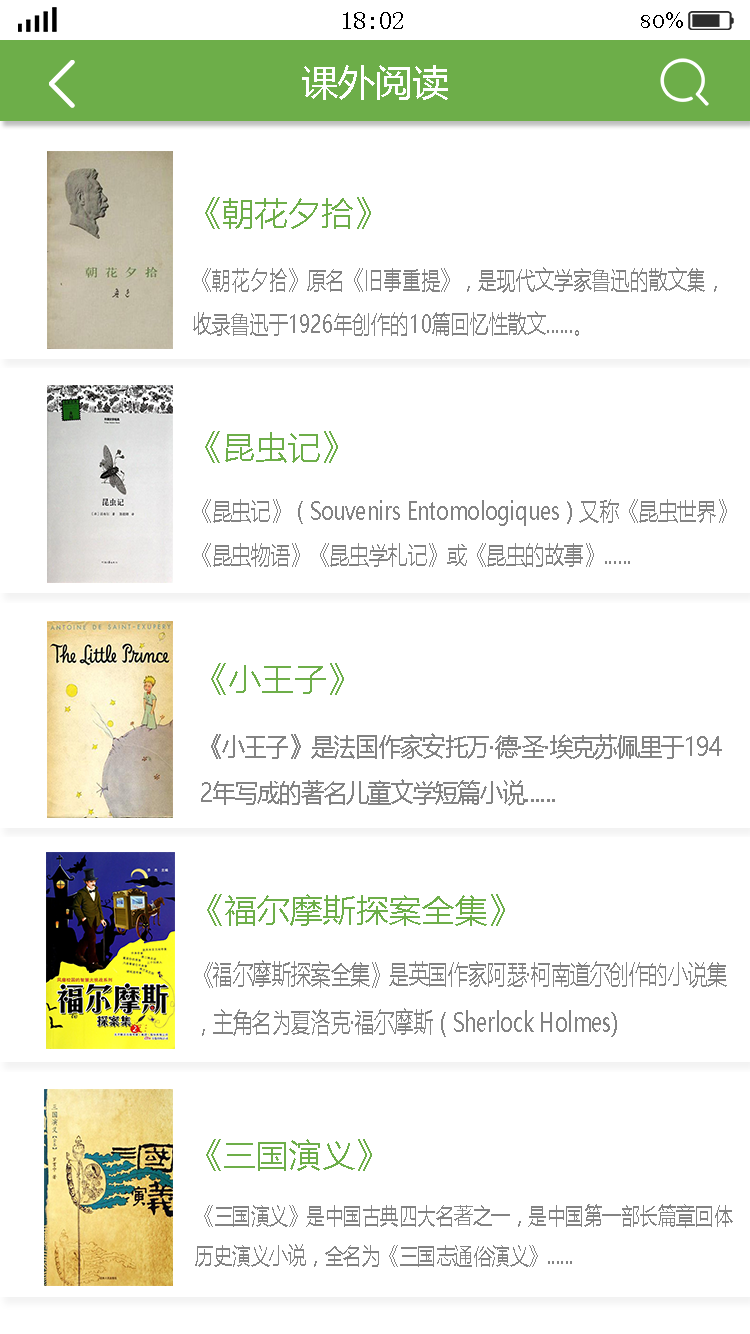
<style>
.page{position:relative;width:750px;height:1334px;background:#ffffff}
.page>*{position:absolute;margin:0}
.t1{font:25px "SimSun";color:#000000}
.t2{font:25px "BellMT";color:#000000}
.t3{font:37.5px "MicrosoftYaHei";color:#ffffff}
.t4{font:33.3px "MicrosoftYaHei";color:#6dae49}
.t5{font:25px "MicrosoftYaHei";color:#838383;scale:0.76 1}
.t6{font:25px "MicrosoftYaHei";color:#838383;scale:0.79 1}
.t7{font:26.3px "MicrosoftYaHei";color:#838383;scale:0.86 1}
.t8{font:27.5px "MicrosoftYaHei";color:#838383;scale:0.72 1}
.t9{font:22.9px "MicrosoftYaHei";color:#838383;scale:0.81 1}
</style>
<div class="page">
<p class="t1" style="left:343px;top:12px;width:60px;height:17px">18:02</p>
<p class="t2" style="left:641px;top:12px;width:42px;height:16px">80%</p>
<p class="t3" style="left:302px;top:65px;width:146px;height:35px">课外阅读</p>
<p class="t4" style="left:205px;top:197px;width:166px;height:32px">《朝花夕拾》</p>
<p class="t5" style="left:193px;top:267px;width:524px;height:69px">《朝花夕拾》原名《旧事重提》，是现代文学家鲁迅的散文集，<br>收录鲁迅于1926年创作的10篇回忆性散文......。</p>
<p class="t4" style="left:205px;top:431px;width:133px;height:32px">《昆虫记》</p>
<p class="t6" style="left:202px;top:499px;width:525px;height:68px">《昆虫记》（Souvenirs Entomologiques）又称《昆虫世界》<br>《昆虫物语》《昆虫学札记》或《昆虫的故事》......</p>
<p class="t4" style="left:211px;top:663px;width:133px;height:32px">《小王子》</p>
<p class="t7" style="left:201px;top:733px;width:521px;height:73px">《小王子》是法国作家安托万·德·圣·埃克苏佩里于194<br>2年写成的著名儿童文学短篇小说......</p>
<p class="t4" style="left:207px;top:894px;width:298px;height:32px">《福尔摩斯探案全集》</p>
<p class="t8" style="left:202px;top:960px;width:525px;height:77px">《福尔摩斯探案全集》是英国作家阿瑟·柯南道尔创作的小说集<br>，主角名为夏洛克·福尔摩斯（Sherlock Holmes)</p>
<p class="t4" style="left:206px;top:1139px;width:166px;height:32px">《三国演义》</p>
<p class="t9" style="left:195px;top:1204px;width:538px;height:63px">《三国演义》是中国古典四大名著之一，是中国第一部长篇章回体<br>历史演义小说，全名为《三国志通俗演义》......</p>
</div>
